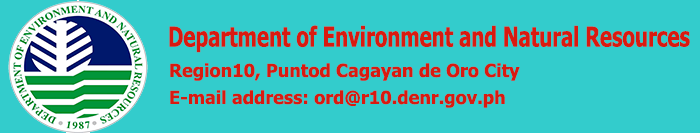
<style>
.page{position:relative;width:700px;height:133px;background:#33cccc}
.page>*{position:absolute;margin:0}
.t1{font:27.3px "Tahoma-Bold";color:#d91a10;scale:0.74 1}
.t2{font:18px "Tahoma-Bold";color:#d91a10}
</style>
<div class="page">
<p class="t1" style="left:169px;top:25px;width:521px;height:28px">Department of Environment and Natural Resources</p>
<p class="t2" style="left:170px;top:63px;width:350px;height:18px">Region10, Puntod Cagayan de Oro City</p>
<p class="t2" style="left:170px;top:90px;width:335px;height:18px">E-mail address: ord@r10.denr.gov.ph</p>
</div>
